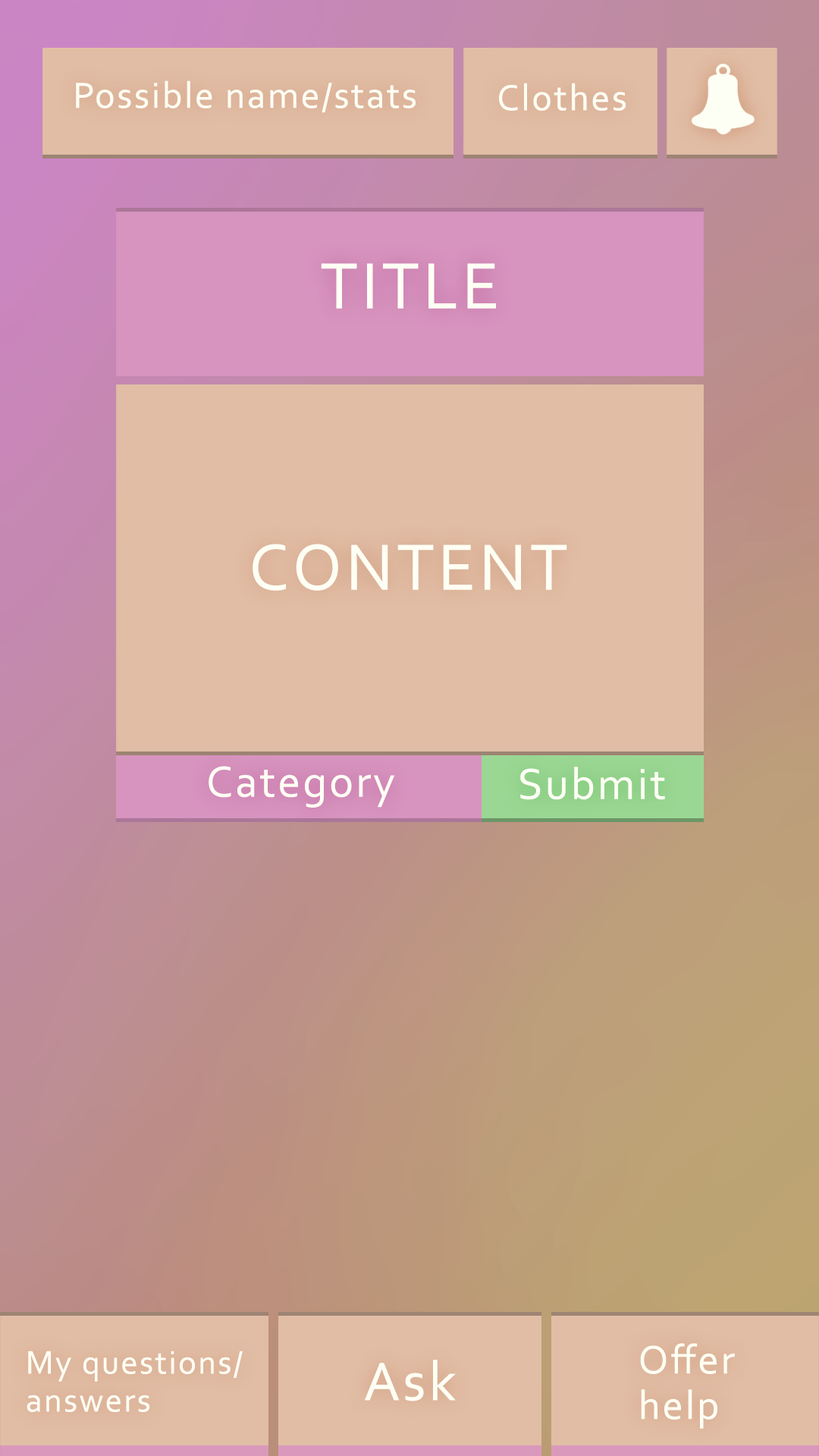
<style>
.page{position:relative;width:819px;height:1456px;background:#e1bda5}
.page>*{position:absolute;margin:0}
.t1{font:37.9px "Corbel";letter-spacing:0.05em;color:#fefff4}
.t2{font:68.2px "Corbel";letter-spacing:0.05em;color:#fefff4}
.t3{font:45.5px "Corbel";letter-spacing:0.05em;color:#fefff4}
.t4{font:41.7px/45.5px "Corbel";letter-spacing:0.05em;color:#fefff4}
.t5{font:34.1px/37.9px "Corbel";letter-spacing:0.05em;color:#fefff4}
.t6{font:56.9px "Corbel";letter-spacing:0.05em;color:#fefff4}
</style>
<div class="page">
<p class="t1" style="left:76px;top:80px;width:340px;height:33px">Possible name/stats</p>
<p class="t1" style="left:499px;top:83px;width:127px;height:28px">Clothes</p>
<p class="t2" style="left:321px;top:263px;width:175px;height:46px">TITLE</p>
<p class="t2" style="left:253px;top:544px;width:314px;height:47px">CONTENT</p>
<p class="t3" style="left:209px;top:766px;width:185px;height:42px">Category</p>
<p class="t3" style="left:520px;top:767px;width:145px;height:33px">Submit</p>
<p class="t4" style="left:640px;top:1343px;width:95px;height:86px">Offer<br>help</p>
<p class="t5" style="left:27px;top:1351px;width:216px;height:61px">My questions/<br>answers</p>
<p class="t6" style="left:365px;top:1360px;width:91px;height:41px">Ask</p>
</div>
